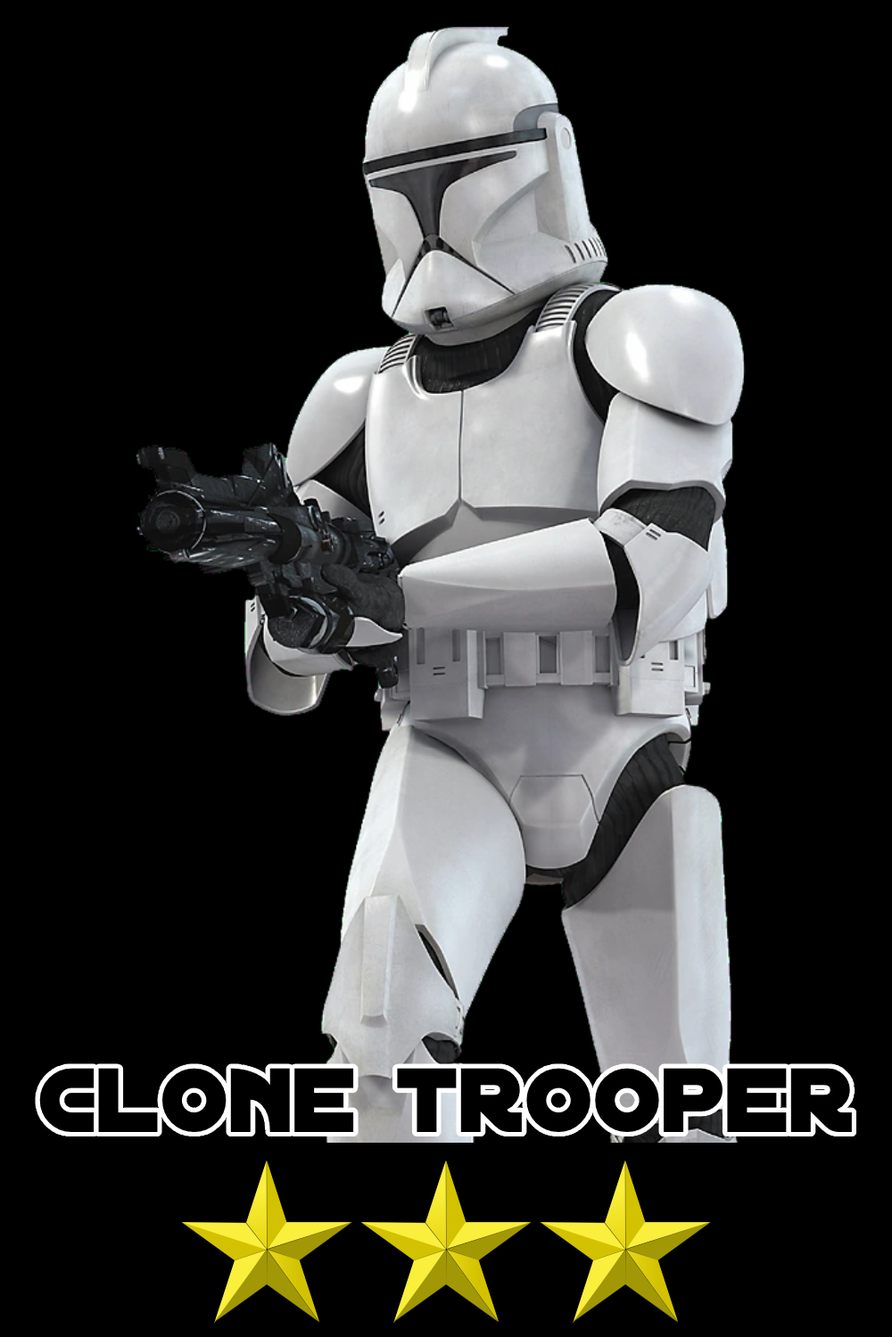
<style>
.page{position:relative;width:892px;height:1337px;background:#000000}
.page>*{position:absolute;margin:0}
.t1{font:97.9px "DistantGalaxy";color:#000000}
</style>
<div class="page">
<p class="t1" style="left:39px;top:1068px;width:812px;height:64px">clone trooper</p>
</div>
